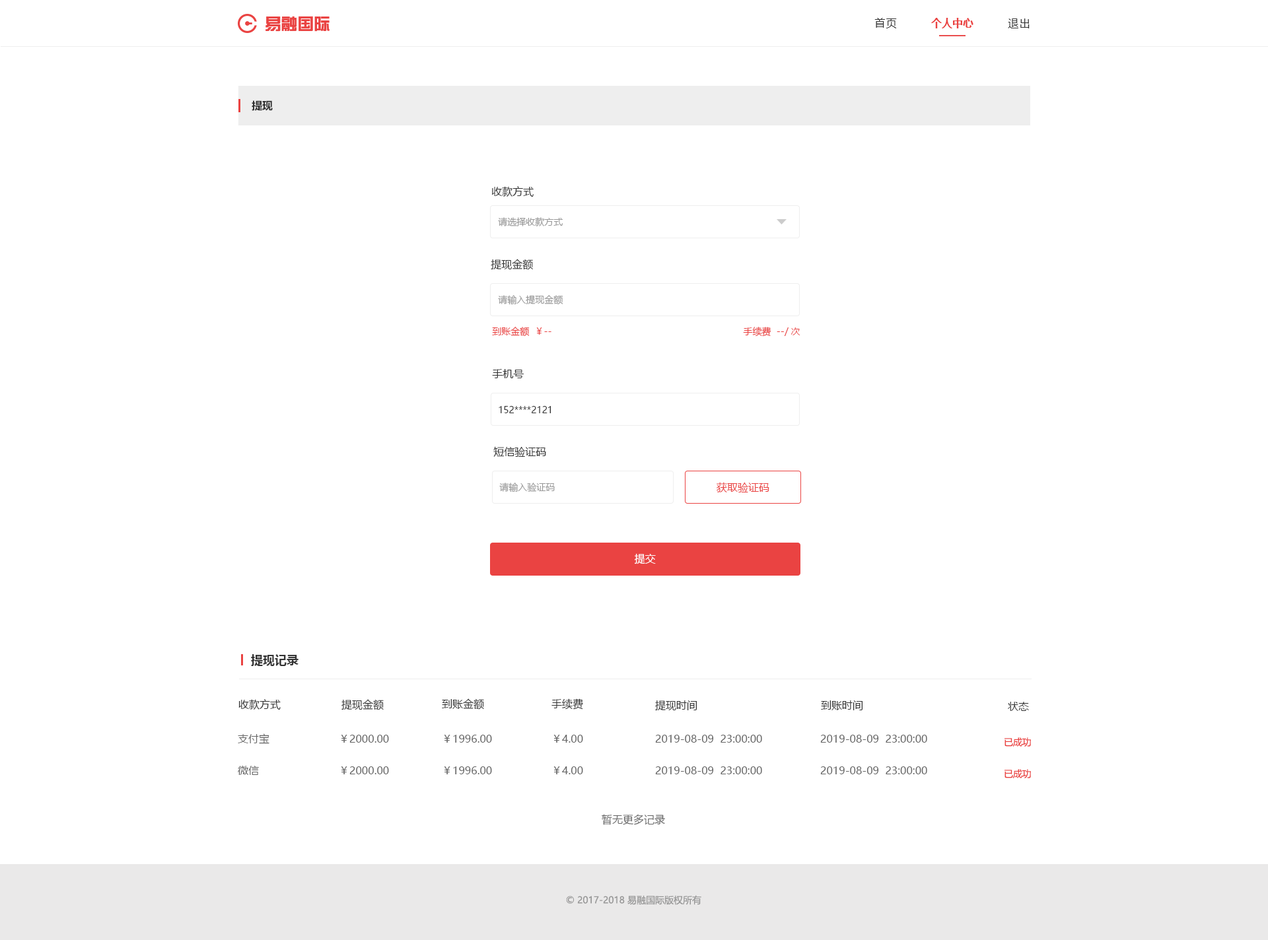
<style>
.page{position:relative;width:1268px;height:940px;background:#ffffff}
.page>*{position:absolute;margin:0}
.t1{font:16.3px "FZZYJW--GB1-0";color:#ea4342}
.t2{font:10.6px "MicrosoftYaHei";letter-spacing:0.08em;color:#333333}
.t3{font:10.6px "MicrosoftYaHei-Bold";color:#ea4342}
.t4{font:10.6px "MicrosoftYaHei-Bold";letter-spacing:-0.01em;color:#333333}
.t5{font:10.6px "MicrosoftYaHei";color:#333333}
.t6{font:9.2px "MicrosoftYaHei";color:#999999}
.t7{font:9.2px "MicrosoftYaHei";color:#ea4342}
.t8{font:9.2px "MicrosoftYaHei";color:#333333}
.t9{font:10.6px "MicrosoftYaHei";color:#ea4342}
.t10{font:10.6px "MicrosoftYaHei";color:#ffffff}
.t11{font:11.9px "MicrosoftYaHei-Bold";color:#333333}
.t12{font:10.6px "MicrosoftYaHei";color:#666666}
.t13{font:9.2px "MicrosoftYaHei";letter-spacing:-0.01em;color:#ea4342}
.t14{font:9.2px "MicrosoftYaHei";color:#969696;text-transform:uppercase}
</style>
<div class="page">
<p class="t1" style="left:265px;top:16px;width:65px;height:16px">易融国际</p>
<p class="t2" style="left:874px;top:18px;width:23px;height:10px">首页</p>
<p class="t3" style="left:931px;top:18px;width:42px;height:10px">个人中心</p>
<p class="t2" style="left:1008px;top:18px;width:22px;height:10px">退出</p>
<p class="t4" style="left:252px;top:100px;width:21px;height:11px">提现</p>
<p class="t5" style="left:491px;top:186px;width:43px;height:11px">收款方式</p>
<p class="t6" style="left:498px;top:217px;width:65px;height:10px">请选择收款方式</p>
<p class="t5" style="left:491px;top:259px;width:42px;height:11px">提现金额</p>
<p class="t6" style="left:498px;top:295px;width:65px;height:10px">请输入提现金额</p>
<p class="t7" style="left:492px;top:327px;width:308px;height:10px">到账金额  ￥--                                                                      手续费  --/次</p>
<p class="t5" style="left:492px;top:369px;width:32px;height:9px">手机号</p>
<p class="t8" style="left:499px;top:406px;width:52px;height:7px">152****2121</p>
<p class="t5" style="left:493px;top:446px;width:53px;height:11px">短信验证码</p>
<p class="t6" style="left:499px;top:483px;width:56px;height:10px">请输入验证码</p>
<p class="t9" style="left:717px;top:482px;width:52px;height:11px">获取验证码</p>
<p class="t10" style="left:635px;top:553px;width:21px;height:12px">提交</p>
<p class="t11" style="left:251px;top:654px;width:48px;height:12px">提现记录</p>
<p class="t5" style="left:238px;top:699px;width:43px;height:11px">收款方式</p>
<p class="t5" style="left:341px;top:699px;width:43px;height:12px">提现金额</p>
<p class="t5" style="left:442px;top:699px;width:42px;height:11px">到账金额</p>
<p class="t5" style="left:551px;top:699px;width:32px;height:11px">手续费</p>
<p class="t5" style="left:655px;top:701px;width:42px;height:10px">提现时间</p>
<p class="t5" style="left:821px;top:701px;width:42px;height:10px">到账时间</p>
<p class="t5" style="left:1008px;top:702px;width:21px;height:9px">状态</p>
<p class="t12" style="left:238px;top:734px;width:31px;height:10px">支付宝</p>
<p class="t12" style="left:341px;top:735px;width:48px;height:8px">￥2000.00</p>
<p class="t12" style="left:444px;top:735px;width:48px;height:8px">￥1996.00</p>
<p class="t12" style="left:553px;top:735px;width:30px;height:8px">￥4.00</p>
<p class="t12" style="left:655px;top:735px;width:107px;height:8px">2019-08-09  23:00:00</p>
<p class="t12" style="left:820px;top:735px;width:107px;height:8px">2019-08-09  23:00:00</p>
<p class="t13" style="left:1004px;top:738px;width:27px;height:9px">已成功</p>
<p class="t12" style="left:238px;top:766px;width:21px;height:9px">微信</p>
<p class="t12" style="left:341px;top:767px;width:48px;height:8px">￥2000.00</p>
<p class="t12" style="left:444px;top:767px;width:48px;height:8px">￥1996.00</p>
<p class="t12" style="left:553px;top:767px;width:30px;height:8px">￥4.00</p>
<p class="t12" style="left:655px;top:767px;width:107px;height:8px">2019-08-09  23:00:00</p>
<p class="t12" style="left:820px;top:767px;width:107px;height:8px">2019-08-09  23:00:00</p>
<p class="t13" style="left:1004px;top:769px;width:27px;height:10px">已成功</p>
<p class="t12" style="left:602px;top:814px;width:63px;height:12px">暂无更多记录</p>
<p class="t14" style="left:566px;top:896px;width:135px;height:9px">© 2017-2018 易融国际版权所有</p>
</div>
